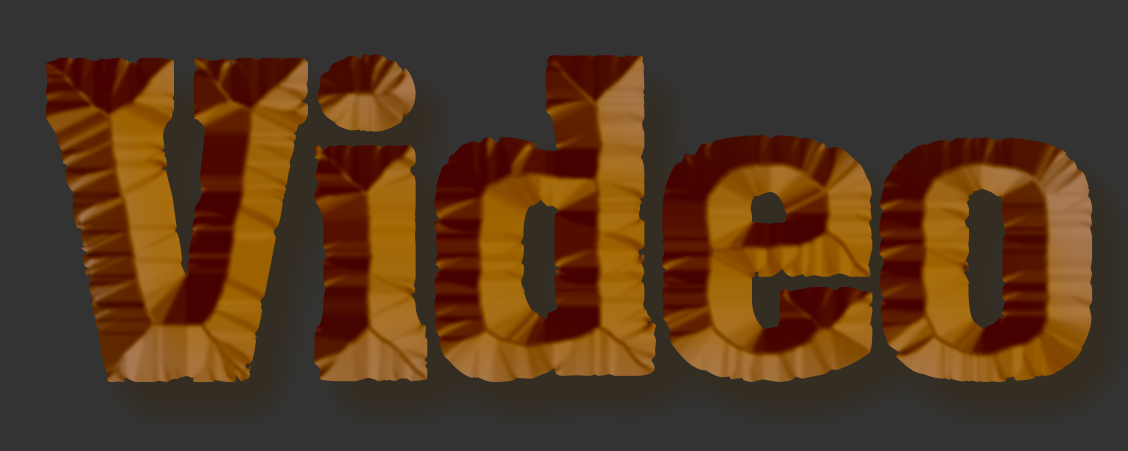
<style>
.page{position:relative;width:1128px;height:451px;background:#333333}
.page>*{position:absolute;margin:0}
.t1{font:350px "Dirty-Old-Town"}
</style>
<div class="page">
<p class="t1" style="left:45px;top:54px;width:1048px;height:328px">Video</p>
</div>
